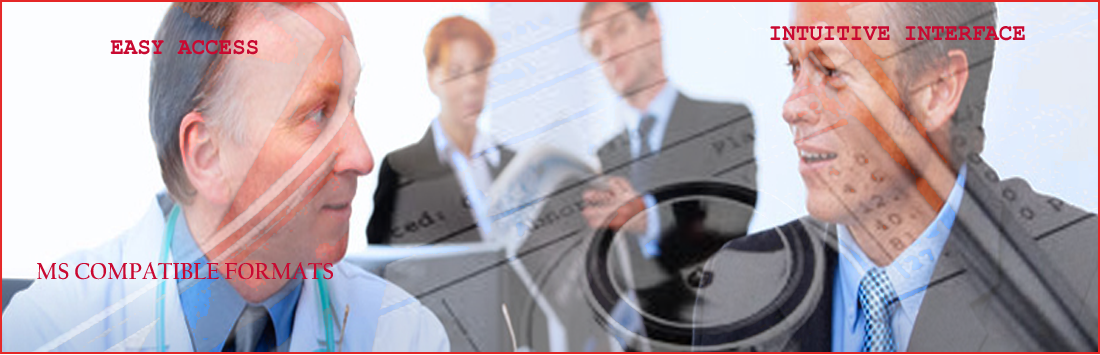
<style>
.page{position:relative;width:1100px;height:355px}
.page>*{position:absolute;margin:0}
.t1{font:24px "CourierNewPS-BoldMT";color:#c90931;scale:0.94 1}
.t2{font:24px "CalifornianFB-Bold";color:#c90931;scale:0.94 1}
</style>
<div class="page">
<p class="t1" style="left:770px;top:26px;width:255px;height:15px">INTUITIVE INTERFACE</p>
<p class="t1" style="left:110px;top:40px;width:148px;height:15px">EASY ACCESS</p>
<p class="t2" style="left:37px;top:262px;width:296px;height:18px">MS COMPATIBLE FORMATS</p>
</div>
